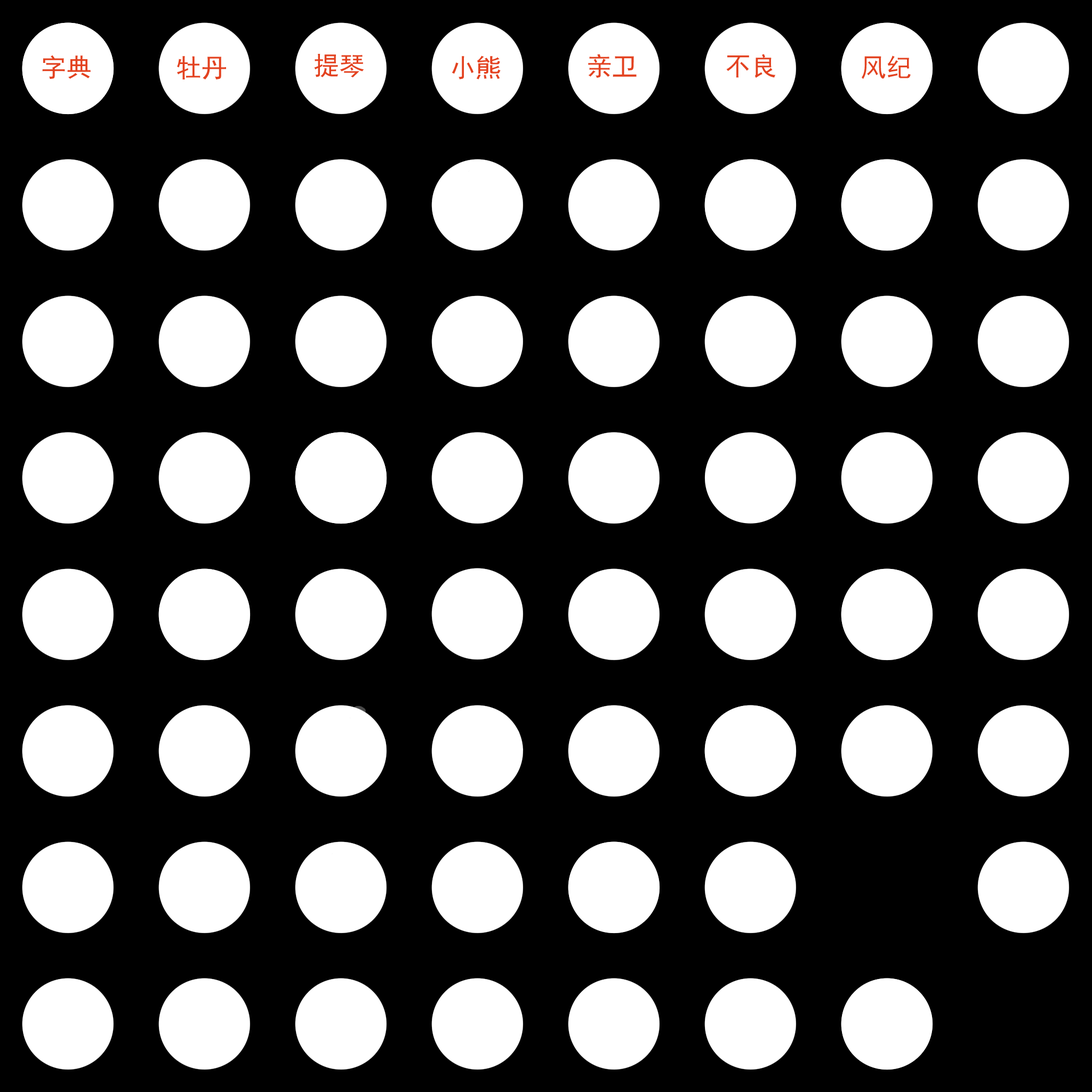
<style>
.page{position:relative;width:1092px;height:1092px;background:#000000}
.page>*{position:absolute;margin:0}
.t1{font:25.6px "SimHei";color:#e34220}
</style>
<div class="page">
<p class="t1" style="left:314px;top:54px;width:50px;height:24px">提琴</p>
<p class="t1" style="left:588px;top:54px;width:49px;height:24px">亲卫</p>
<p class="t1" style="left:726px;top:54px;width:50px;height:24px">不良</p>
<p class="t1" style="left:42px;top:55px;width:49px;height:24px">字典</p>
<p class="t1" style="left:177px;top:56px;width:49px;height:23px">牡丹</p>
<p class="t1" style="left:452px;top:55px;width:49px;height:24px">小熊</p>
<p class="t1" style="left:862px;top:55px;width:49px;height:24px">风纪</p>
</div>
